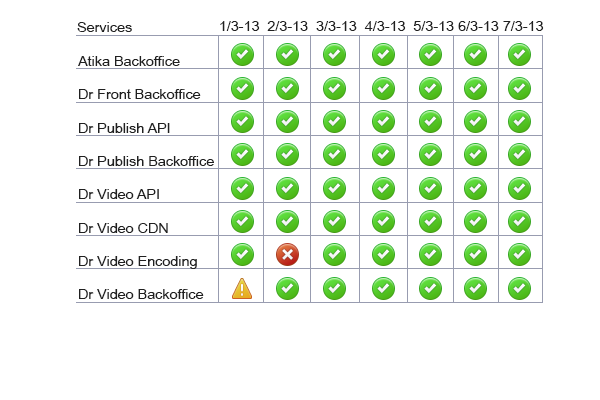
<style>
.page{position:relative;width:600px;height:400px;background:#ffffff}
.page>*{position:absolute;margin:0}
.t1{font:14px "ArialNarrow";color:#202020;scale:1.25 1}
.t2{font:14px/33.3px "ArialNarrow";color:#202020;scale:1.25 1}
</style>
<div class="page">
<p class="t1" style="left:77px;top:22px;width:55px;height:10px">Services</p>
<p class="t1" style="left:220px;top:21px;width:324px;height:10px">1/3-13  2/3-13  3/3-13  4/3-13  5/3-13 6/3-13 7/3-13</p>
<p class="t2" style="left:78px;top:56px;width:136px;height:243px">Atika Backoffice<br>Dr Front Backoffice<br>Dr Publish API<br>Dr Publish Backoffice<br>Dr Video API<br>Dr Video CDN<br>Dr Video Encoding<br>Dr Video Backoffice</p>
</div>
